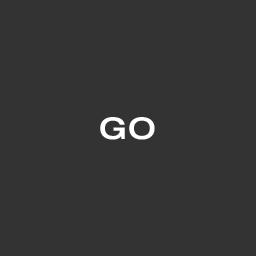
<style>
.page{position:relative;width:256px;height:256px;background:#333333}
.page>*{position:absolute;margin:0}
.t1{font:30px "Shapiro-55MiddleWide";letter-spacing:0.05em;color:#ffffff}
</style>
<div class="page">
<p class="t1" style="left:100px;top:117px;width:55px;height:23px">GO</p>
</div>
